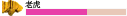
<style>
.page{position:relative;width:127px;height:16px;background:#ffffff}
.page>*{position:absolute;margin:0}
.t1{font:8px "SimSun";letter-spacing:-0.05em;color:#151715;text-transform:uppercase}
</style>
<div class="page">
<p class="t1" style="left:25px;top:0px;width:16px;height:9px">老虎</p>
</div>
